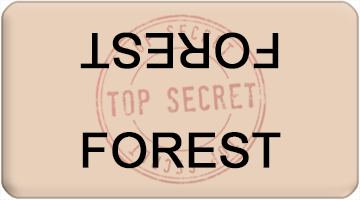
<style>
.page{position:relative;width:360px;height:200px;background:#e8d0bb}
.page>*{position:absolute;margin:0}
.t1{font:48px "ArialMT";color:#000000;font-weight:bold}
</style>
<div class="page">
<p class="t1" style="left:80px;top:32px;width:199px;height:37px;rotate:180deg">FOREST</p>
<p class="t1" style="left:82px;top:132px;width:199px;height:37px">FOREST</p>
</div>
